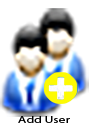
<style>
.page{position:relative;width:90px;height:125px;background:#ffffff}
.page>*{position:absolute;margin:0}
.t1{font:9px "MyriadPro-Regular";color:#000000;scale:1.51 1}
</style>
<div class="page">
<p class="t1" style="left:18px;top:116px;width:52px;height:7px">Add User</p>
</div>
